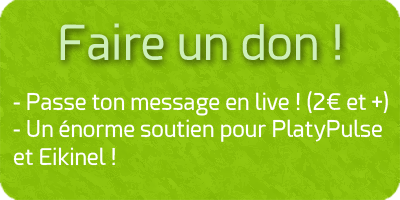
<style>
.page{position:relative;width:400px;height:200px}
.page>*{position:absolute;margin:0}
.t1{font:48px "Esphimere";color:#ceefb8}
.t2{font:22.7px "Esphimere";color:#ffffff}
</style>
<div class="page">
<p class="t1" style="left:60px;top:23px;width:280px;height:37px">Faire un don !</p>
<p class="t2" style="left:13px;top:91px;width:375px;height:75px">- Passe ton message en live ! (2€ et +)<br>- Un énorme soutien pour PlatyPulse et Eikinel !</p>
</div>
